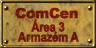
<style>
.page{position:relative;width:96px;height:48px}
.page>*{position:absolute;margin:0}
.t1{font:14px "Arial-Black";letter-spacing:-0.04em;color:#731a08;font-weight:bold}
.t2{font:13px/10px "Arial-BoldMT";letter-spacing:-0.04em;color:#711a08;font-weight:bold;scale:0.86 1}
.t3{font:13px/10px "Arial-BoldMT";letter-spacing:0.02em;color:#711a08;font-weight:bold;scale:0.86 1}
</style>
<div class="page">
<p class="t1" style="left:15px;top:7px;width:63px;height:12px">ComCen</p>
<p class="t2" style="left:17px;top:19px;width:62px;height:23px;text-align:center">Área 3<br>A<span class="t3">r</span>mazém A</p>
</div>
